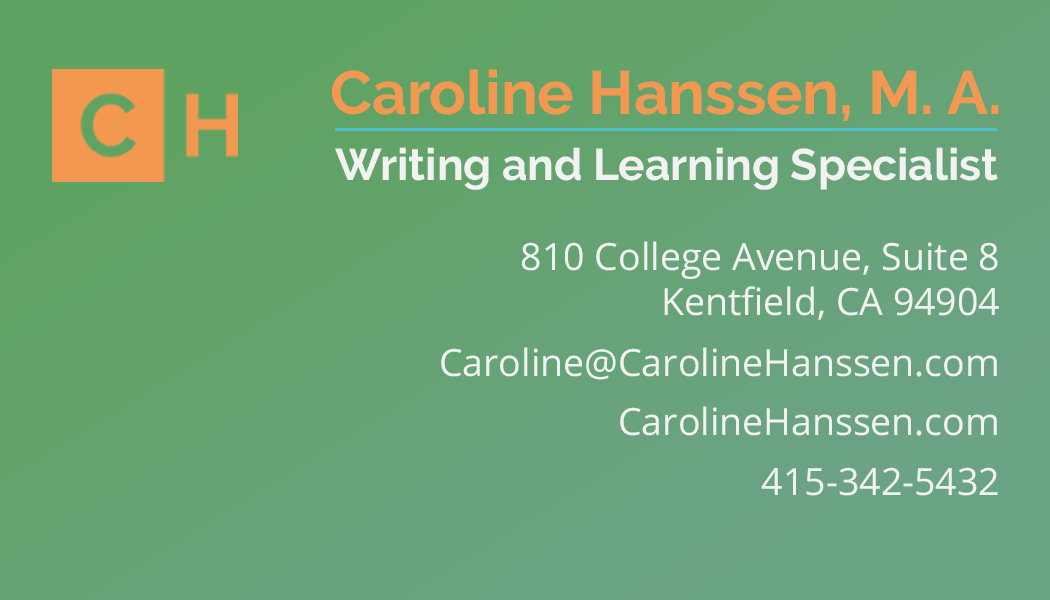
<style>
.page{position:relative;width:1050px;height:600px}
.page>*{position:absolute;margin:0}
.t1{font:60.9px "Raleway-Bold";color:#f29850}
.t2{font:44.2px "Raleway-Bold";color:#f2f2f2}
.t3{font:37.5px "OpenSans-Regular";color:#f2f2f2}
</style>
<div class="page">
<p class="t1" style="left:332px;top:69px;width:667px;height:52px">Caroline Hanssen, M. A.</p>
<p class="t2" style="left:335px;top:147px;width:663px;height:43px">Writing and Learning Specialist</p>
<p class="t3" style="left:522px;top:241px;width:477px;height:79px;text-align:right">810 College Avenue, Suite 8<br>Kentfield, CA 94904</p>
<p class="t3" style="left:441px;top:347px;width:556px;height:33px">Caroline@CarolineHanssen.com</p>
<p class="t3" style="left:620px;top:406px;width:377px;height:30px">CarolineHanssen.com</p>
<p class="t3" style="left:761px;top:467px;width:237px;height:29px">415-342-5432</p>
</div>
